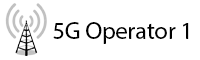
<style>
.page{position:relative;width:200px;height:60px;background:#ffffff}
.page>*{position:absolute;margin:0}
.t1{font:24px "MyriadPro-Regular";color:#000000}
</style>
<div class="page">
<p class="t1" style="left:53px;top:22px;width:136px;height:22px">5G Operator 1</p>
</div>
